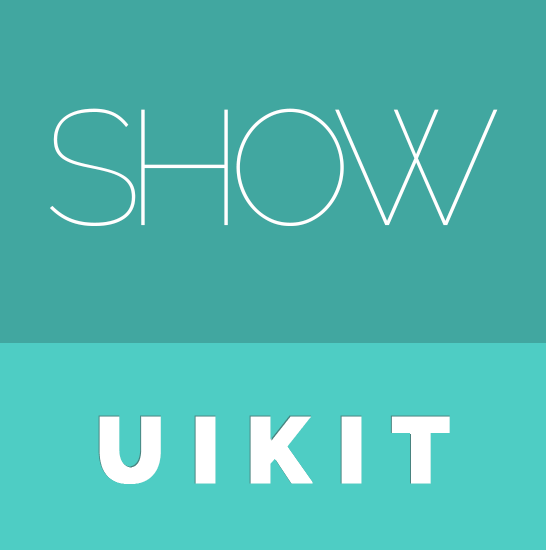
<style>
.page{position:relative;width:546px;height:550px;background:#41a7a0}
.page>*{position:absolute;margin:0}
.t1{font:161.4px "Raleway-Thin";letter-spacing:-0.1em;color:#ffffff}
.t2{font:94px "Raleway-Heavy";letter-spacing:0.25em;color:#ffffff;font-weight:bold}
</style>
<div class="page">
<p class="t1" style="left:49px;top:108px;width:449px;height:118px">SHOW</p>
<p class="t2" style="left:98px;top:415px;width:352px;height:69px">UIKIT</p>
</div>
